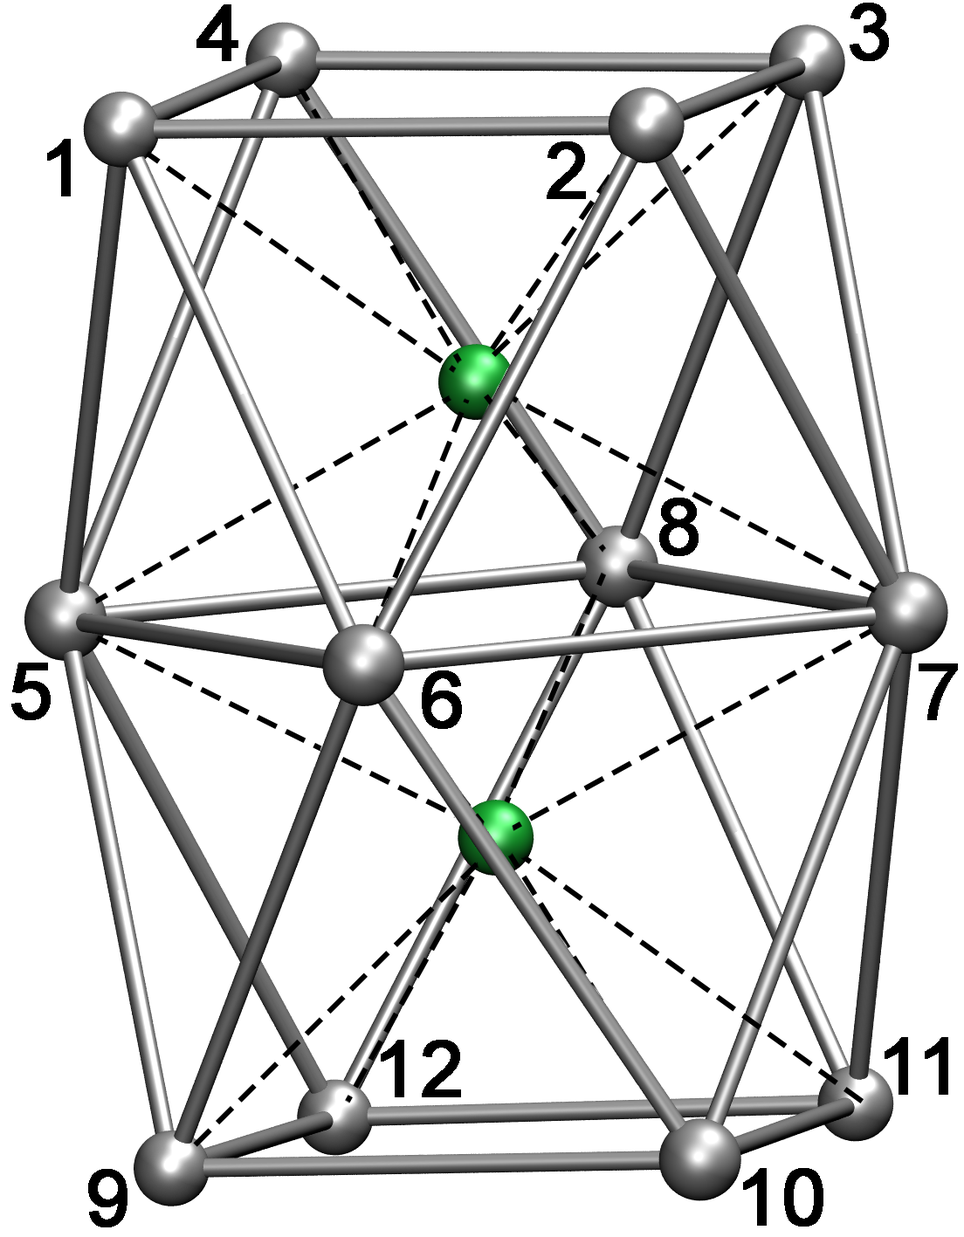
<style>
.page{position:relative;width:964px;height:1237px;background:#ffffff}
.page>*{position:absolute;margin:0}
.t1{font:78.6px "ArialMT";color:#000000;font-weight:bold}
</style>
<div class="page">
<p class="t1" style="left:196px;top:4px;width:42px;height:57px">4</p>
<p class="t1" style="left:849px;top:3px;width:40px;height:58px">3</p>
<p class="t1" style="left:47px;top:139px;width:24px;height:57px">1</p>
<p class="t1" style="left:547px;top:141px;width:39px;height:58px">2</p>
<p class="t1" style="left:659px;top:498px;width:39px;height:58px">8</p>
<p class="t1" style="left:11px;top:663px;width:40px;height:57px">5</p>
<p class="t1" style="left:918px;top:664px;width:40px;height:56px">7</p>
<p class="t1" style="left:422px;top:671px;width:40px;height:58px">6</p>
<p class="t1" style="left:884px;top:1037px;width:64px;height:58px">11</p>
<p class="t1" style="left:381px;top:1040px;width:80px;height:57px">12</p>
<p class="t1" style="left:88px;top:1169px;width:39px;height:59px">9</p>
<p class="t1" style="left:743px;top:1168px;width:80px;height:59px">10</p>
</div>
